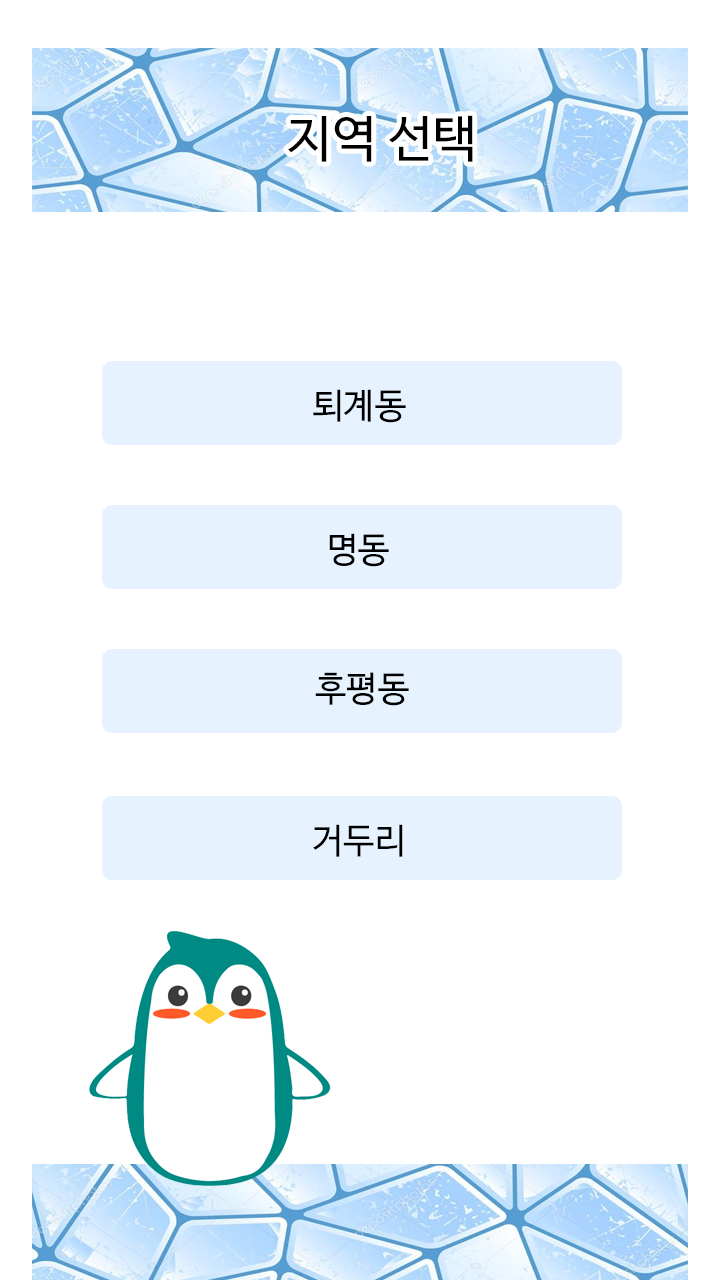
<style>
.page{position:relative;width:720px;height:1280px;background:#ffffff}
.page>*{position:absolute;margin:0}
.t1{font:50px "NanumBarunGothic";color:#000000}
.t2{font:35px "NanumBarunGothic";color:#000000}
</style>
<div class="page">
<p class="t1" style="left:288px;top:115px;width:185px;height:47px">지역 선택</p>
<p class="t2" style="left:313px;top:389px;width:93px;height:34px">퇴계동</p>
<p class="t2" style="left:329px;top:533px;width:60px;height:34px">명동</p>
<p class="t2" style="left:315px;top:672px;width:94px;height:34px">후평동</p>
<p class="t2" style="left:313px;top:824px;width:90px;height:33px">거두리</p>
</div>
